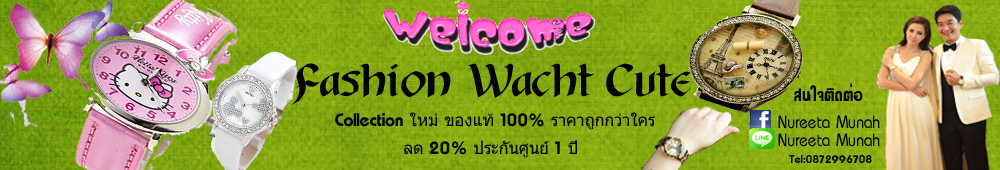
<style>
.page{position:relative;width:1000px;height:170px}
.page>*{position:absolute;margin:0}
.t1{font:41.7px "DSP_YaoWaRat";color:#030403}
.t2{font:25px "DSNRatBuRaNa";color:#030403}
.t3{font:16.7px "Tahoma";color:#030403}
.t4{font:16.7px "DSP_RatBuRaNa";color:#030403}
.t5{font:16.7px "DSP_Single";color:#030403}
.t6{font:16.7px "DSNRatBuRaNa";color:#030403}
</style>
<div class="page">
<p class="t1" style="left:292px;top:63px;width:399px;height:42px">Fashion Wacht Cute</p>
<p class="t2" style="left:794px;top:83px;width:69px;height:18px">สนใจติดต่อ</p>
<p class="t3" style="left:335px;top:112px;width:320px;height:18px"><span class="t4">Collection </span>ใหม่ ของแท้<span class="t4"> 100% </span>ราคาถูกกว่าใคร</p>
<p class="t5" style="left:778px;top:115px;width:102px;height:14px">Nureeta Munah</p>
<p class="t5" style="left:778px;top:133px;width:102px;height:14px">Nureeta Munah</p>
<p class="t3" style="left:404px;top:140px;width:173px;height:18px">ลด<span class="t4"> 20% </span>ประกันศูนย์<span class="t4"> 1 </span>ปี</p>
<p class="t6" style="left:789px;top:155px;width:83px;height:8px">Tel:0872996708</p>
</div>
